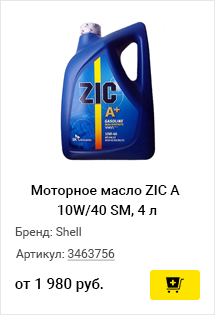
<style>
.page{position:relative;width:215px;height:315px;background:#ffffff}
.page>*{position:absolute;margin:0}
.t1{font:14px/20px "Roboto-Medium";color:#000000}
.t2{font:12px "Roboto-Regular";color:#505050}
.t3{font:12px "Roboto-Regular";color:#505050;text-decoration:underline}
.t4{font:15px "Roboto-Medium";color:#000000}
</style>
<div class="page">
<p class="t1" style="left:31px;top:185px;width:149px;height:32px;text-align:center">Моторное масло ZIC A <br>10W/40 SM, 4 л</p>
<p class="t2" style="left:15px;top:227px;width:66px;height:12px">Бренд: Shell</p>
<p class="t2" style="left:16px;top:249px;width:99px;height:12px">Артикул: <span class="t3">3463756</span></p>
<p class="t4" style="left:15px;top:278px;width:88px;height:14px">от 1 980 руб.</p>
</div>
